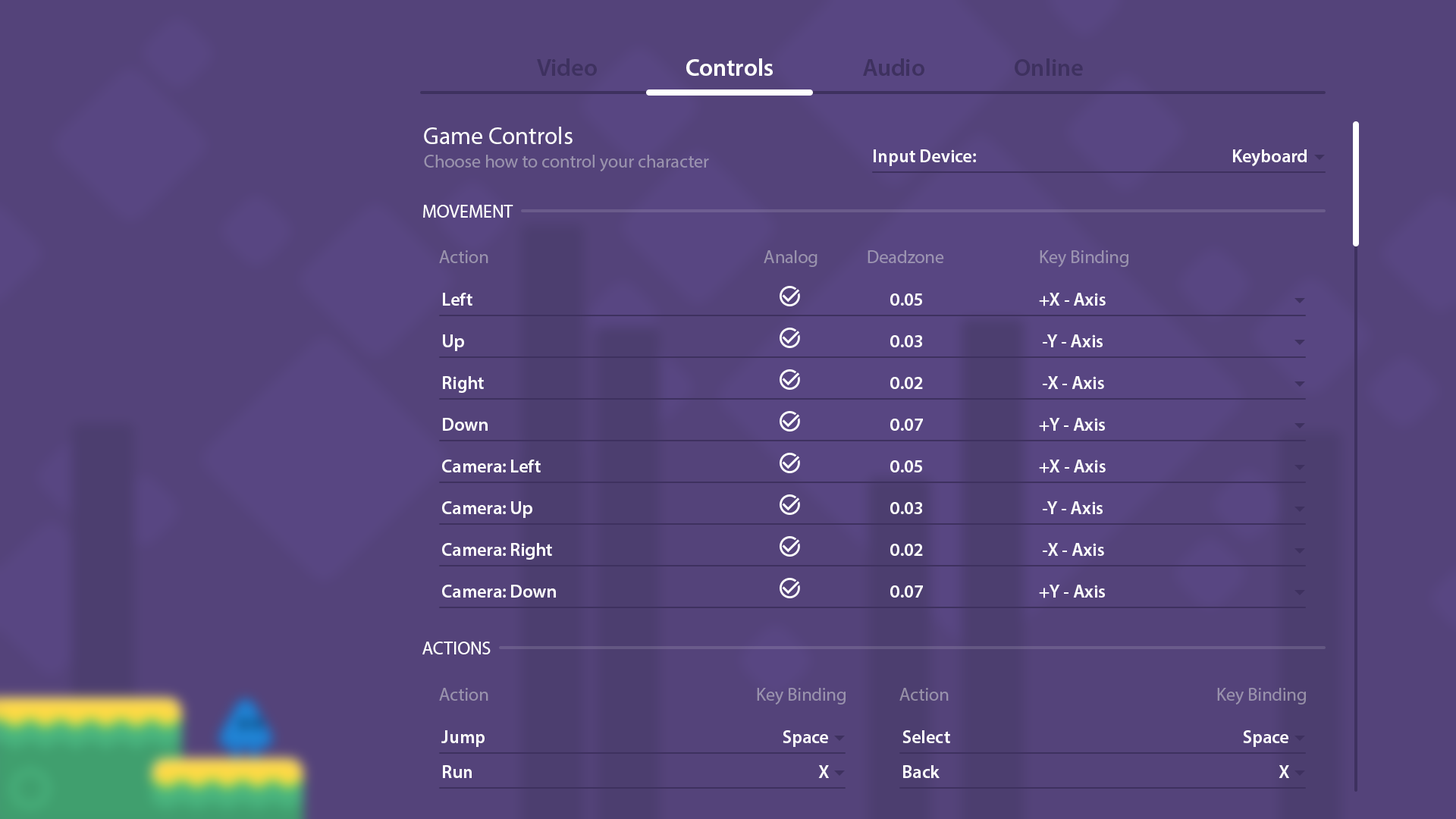
<style>
.page{position:relative;width:1456px;height:819px;background:#54437a}
.page>*{position:absolute;margin:0}
.t1{font:24.3px "MyriadPro-Semibold";color:#3e315f}
.t2{font:24.3px "MyriadPro-Semibold";color:#ffffff}
.t3{font:24.3px "MyriadPro-Regular";color:#ffffff}
.t4{font:18.2px "MyriadPro-Semibold";color:#ffffff}
.t5{font:18.2px "MyriadPro-Regular";color:#9992ad}
.t6{font:18.2px "MyriadPro-Regular";color:#ffffff}
.t7{font:18.2px "MyriadPro-Regular";color:#9b93b1}
.t8{font:18.2px "MyriadPro-Regular";color:#9690a8}
</style>
<div class="page">
<p class="t1" style="left:537px;top:58px;width:60px;height:18px">Video</p>
<p class="t2" style="left:686px;top:58px;width:87px;height:18px">Controls</p>
<p class="t1" style="left:863px;top:58px;width:61px;height:18px">Audio</p>
<p class="t1" style="left:1015px;top:58px;width:68px;height:18px">Online</p>
<p class="t3" style="left:424px;top:127px;width:149px;height:17px">Game Controls</p>
<p class="t4" style="left:874px;top:149px;width:102px;height:17px">Input Device:</p>
<p class="t4" style="left:1233px;top:149px;width:74px;height:17px">Keyboard</p>
<p class="t5" style="left:424px;top:155px;width:285px;height:16px">Choose how to control your character</p>
<p class="t6" style="left:423px;top:205px;width:90px;height:13px">MOVEMENT</p>
<p class="t5" style="left:439px;top:250px;width:49px;height:13px">Action</p>
<p class="t5" style="left:764px;top:250px;width:53px;height:17px">Analog</p>
<p class="t7" style="left:868px;top:250px;width:76px;height:13px">Deadzone</p>
<p class="t7" style="left:1040px;top:250px;width:88px;height:17px">Key Binding</p>
<p class="t4" style="left:443px;top:293px;width:29px;height:13px">Left</p>
<p class="t4" style="left:890px;top:293px;width:32px;height:13px">0.05</p>
<p class="t4" style="left:1039px;top:293px;width:67px;height:13px">+X - Axis</p>
<p class="t4" style="left:443px;top:334px;width:21px;height:17px">Up</p>
<p class="t4" style="left:890px;top:335px;width:32px;height:12px">0.03</p>
<p class="t4" style="left:1043px;top:334px;width:60px;height:13px">-Y - Axis</p>
<p class="t4" style="left:443px;top:376px;width:41px;height:17px">Right</p>
<p class="t4" style="left:890px;top:377px;width:33px;height:12px">0.02</p>
<p class="t4" style="left:1043px;top:376px;width:61px;height:13px">-X - Axis</p>
<p class="t4" style="left:443px;top:418px;width:45px;height:13px">Down</p>
<p class="t4" style="left:890px;top:419px;width:33px;height:12px">0.07</p>
<p class="t4" style="left:1039px;top:418px;width:66px;height:13px">+Y - Axis</p>
<p class="t4" style="left:442px;top:460px;width:99px;height:12px">Camera: Left</p>
<p class="t4" style="left:890px;top:460px;width:32px;height:12px">0.05</p>
<p class="t4" style="left:1039px;top:460px;width:67px;height:13px">+X - Axis</p>
<p class="t4" style="left:442px;top:501px;width:90px;height:17px">Camera: Up</p>
<p class="t4" style="left:890px;top:502px;width:32px;height:12px">0.03</p>
<p class="t4" style="left:1043px;top:501px;width:60px;height:13px">-Y - Axis</p>
<p class="t4" style="left:442px;top:543px;width:110px;height:17px">Camera: Right</p>
<p class="t4" style="left:890px;top:544px;width:33px;height:12px">0.02</p>
<p class="t4" style="left:1043px;top:543px;width:61px;height:13px">-X - Axis</p>
<p class="t4" style="left:442px;top:585px;width:114px;height:13px">Camera: Down</p>
<p class="t4" style="left:890px;top:585px;width:33px;height:13px">0.07</p>
<p class="t4" style="left:1039px;top:585px;width:66px;height:13px">+Y - Axis</p>
<p class="t6" style="left:422px;top:642px;width:69px;height:12px">ACTIONS</p>
<p class="t5" style="left:439px;top:688px;width:49px;height:13px">Action</p>
<p class="t5" style="left:757px;top:688px;width:89px;height:16px">Key Binding</p>
<p class="t8" style="left:899px;top:688px;width:50px;height:13px">Action</p>
<p class="t5" style="left:1217px;top:688px;width:89px;height:16px">Key Binding</p>
<p class="t4" style="left:441px;top:730px;width:44px;height:17px">Jump</p>
<p class="t4" style="left:783px;top:730px;width:45px;height:17px">Space</p>
<p class="t4" style="left:902px;top:730px;width:48px;height:13px">Select</p>
<p class="t4" style="left:1243px;top:730px;width:45px;height:17px">Space</p>
<p class="t4" style="left:443px;top:765px;width:29px;height:13px">Run</p>
<p class="t4" style="left:818px;top:765px;width:11px;height:13px">X</p>
<p class="t4" style="left:903px;top:765px;width:37px;height:13px">Back</p>
<p class="t4" style="left:1279px;top:765px;width:10px;height:13px">X</p>
</div>
